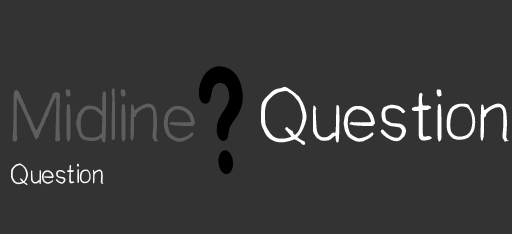
<style>
.page{position:relative;width:512px;height:234px;background:#333333}
.page>*{position:absolute;margin:0}
.t1{font:90px "Stay-Writer";color:#fefefe}
.t2{font:90px "Stay-Writer";color:#5f5d5d}
.t3{font:33.3px "Stay-Writer";color:#f9f9f9}
</style>
<div class="page">
<p class="t1" style="left:11px;top:86px;width:498px;height:100px"><span class="t2">Midline   </span>Question<br><span class="t3">Question</span></p>
</div>
